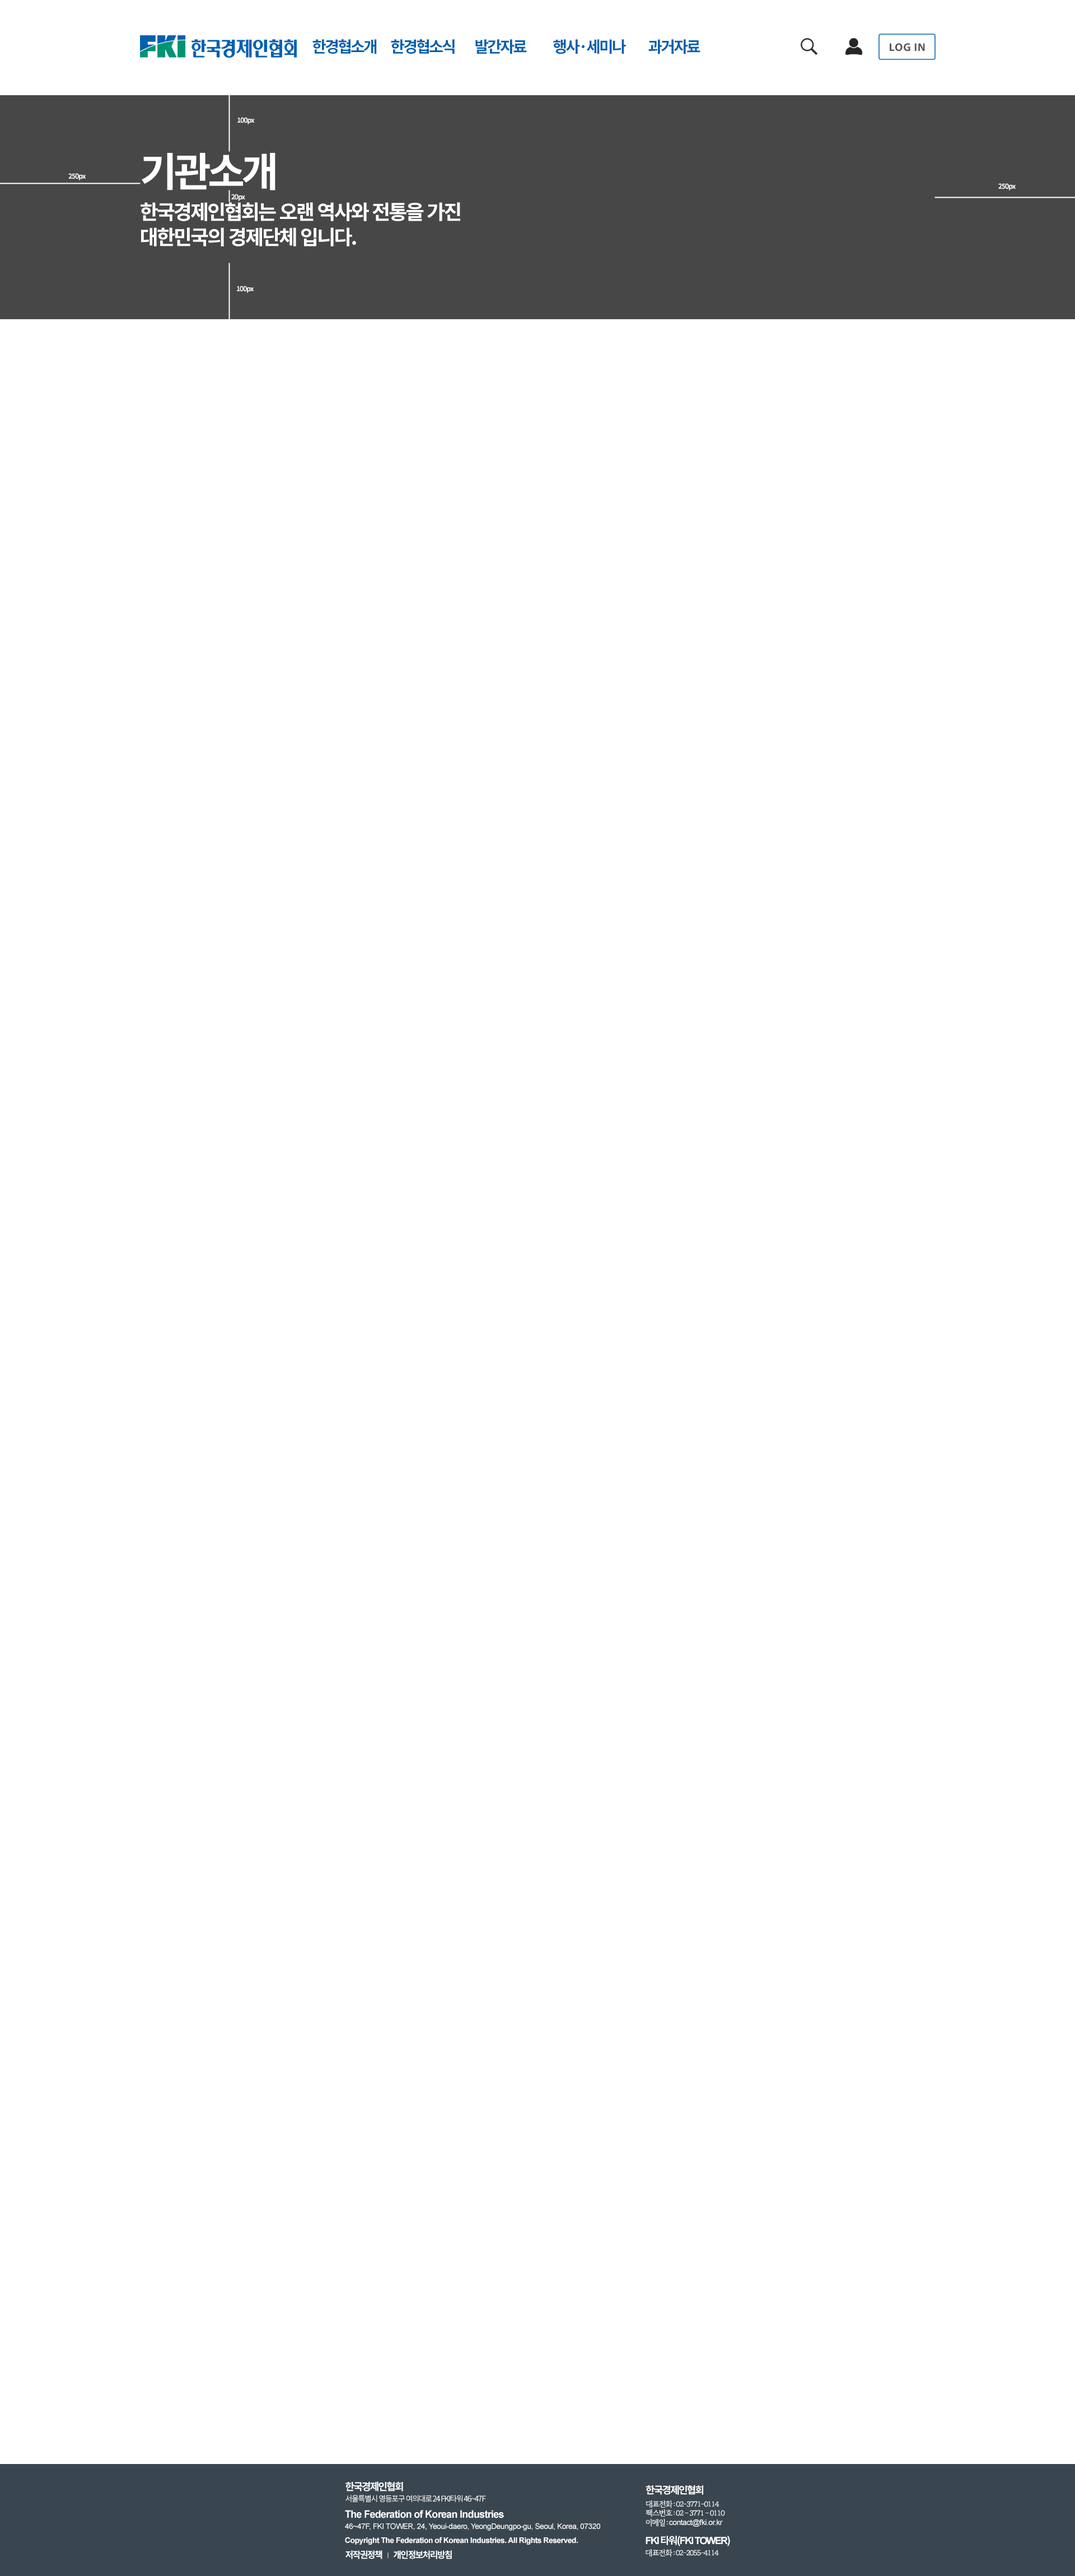
<style>
.page{position:relative;width:1075px;height:2576px;background:#ffffff}
.page>*{position:absolute;margin:0}
.t1{font:15.7px "NotoSansCJKkr-Bold";letter-spacing:-0.1em;color:#0060b0}
.t2{font:11.2px "MyriadPro-Bold";letter-spacing:0.04em;color:#5a5a5a}
.t3{font:6.7px "NotoSansCJKkr-Bold";letter-spacing:-0.08em;color:#ffffff}
.t4{font:40.3px "NotoSansCJKkr-Bold";letter-spacing:-0.08em;color:#ffffff}
.t5{font:20.2px/25.2px "NotoSansCJKkr-Bold";letter-spacing:-0.08em;color:#ffffff}
.t6{font:10.1px "NotoSansCJKkr-Bold";letter-spacing:-0.1em;color:#ffffff}
.t7{font:10px "NotoSansCJKkr-Bold";letter-spacing:-0.1em;color:#ffffff}
.t8{font:7.8px "NotoSansCJKkr-Regular";letter-spacing:-0.1em;color:#ffffff}
.t9{font:7.8px "RIDIBatang";letter-spacing:-0.1em;color:#ffffff}
.t10{font:10.2px "Arial-BoldMT";letter-spacing:-0.04em;color:#ffffff}
.t11{font:7.9px "ArialMT";letter-spacing:-0.04em;color:#ffffff}
.t12{font:7.8px "ArialMT";letter-spacing:-0.04em;color:#ffffff}
.t13{font:7.8px "Arial-BoldMT";letter-spacing:-0.04em;color:#ffffff}
.t14{font:10px "Arial-BoldMT";letter-spacing:-0.1em;color:#ffffff}
.t15{font:7.7px "RIDIBatang";letter-spacing:-0.1em;color:#ffffff}
.t16{font:9px "NotoSansCJKkr-Bold";letter-spacing:-0.1em;color:#ffffff}
</style>
<div class="page">
<p class="t1" style="left:312px;top:39px;width:65px;height:15px">한경협소개</p>
<p class="t1" style="left:391px;top:39px;width:64px;height:15px">한경협소식</p>
<p class="t1" style="left:475px;top:39px;width:52px;height:15px">발간자료</p>
<p class="t1" style="left:553px;top:39px;width:73px;height:15px">행사·세미나</p>
<p class="t1" style="left:648px;top:39px;width:53px;height:15px">과거자료</p>
<p class="t2" style="left:890px;top:43px;width:35px;height:9px">LOG IN</p>
<p class="t3" style="left:237px;top:117px;width:18px;height:7px">100px</p>
<p class="t4" style="left:142px;top:153px;width:134px;height:37px">기관소개</p>
<p class="t3" style="left:68px;top:173px;width:18px;height:7px">250px</p>
<p class="t3" style="left:998px;top:183px;width:18px;height:7px">250px</p>
<p class="t3" style="left:231px;top:194px;width:14px;height:7px">20px</p>
<p class="t5" style="left:141px;top:202px;width:319px;height:44px">한국경제인협회는 오랜 역사와 전통을 가진 <br>대한민국의 경제단체 입니다.</p>
<p class="t3" style="left:237px;top:286px;width:17px;height:7px">100px</p>
<p class="t6" style="left:346px;top:2481px;width:57px;height:10px">한국경제인협회</p>
<p class="t7" style="left:646px;top:2485px;width:57px;height:10px">한국경제인협회</p>
<p class="t8" style="left:346px;top:2495px;width:140px;height:8px">서울특별시 영등포구 여의대로 24 FKI타워 46~47F</p>
<p class="t9" style="left:646px;top:2500px;width:74px;height:8px">대표전화 : 02-3771-0114</p>
<p class="t10" style="left:345px;top:2510px;width:159px;height:8px">The Federation of Korean Industries</p>
<p class="t9" style="left:646px;top:2509px;width:79px;height:8px">팩스번호 : 02 - 3771 - 0110</p>
<p class="t11" style="left:345px;top:2523px;width:255px;height:8px">46~47F, FKI TOWER, 24, Yeoui-daero, YeongDeungpo-gu, Seoul, Korea, 07320</p>
<p class="t12" style="left:646px;top:2519px;width:77px;height:8px"><span class="t9">이메일 : </span>contact@fki.or.kr</p>
<p class="t13" style="left:345px;top:2537px;width:233px;height:8px">Copyright The Federation of Korean Industries. All Rights Reserved.</p>
<p class="t14" style="left:646px;top:2536px;width:84px;height:10px">FKI <span class="t7">타워(</span>FKI TOWER<span class="t7">)</span></p>
<p class="t15" style="left:646px;top:2549px;width:73px;height:8px">대표전화 : 02-2055-4114</p>
<p class="t16" style="left:346px;top:2550px;width:36px;height:9px">저작권정책</p>
<p class="t16" style="left:393px;top:2550px;width:59px;height:9px">개인정보처리방침</p>
</div>
